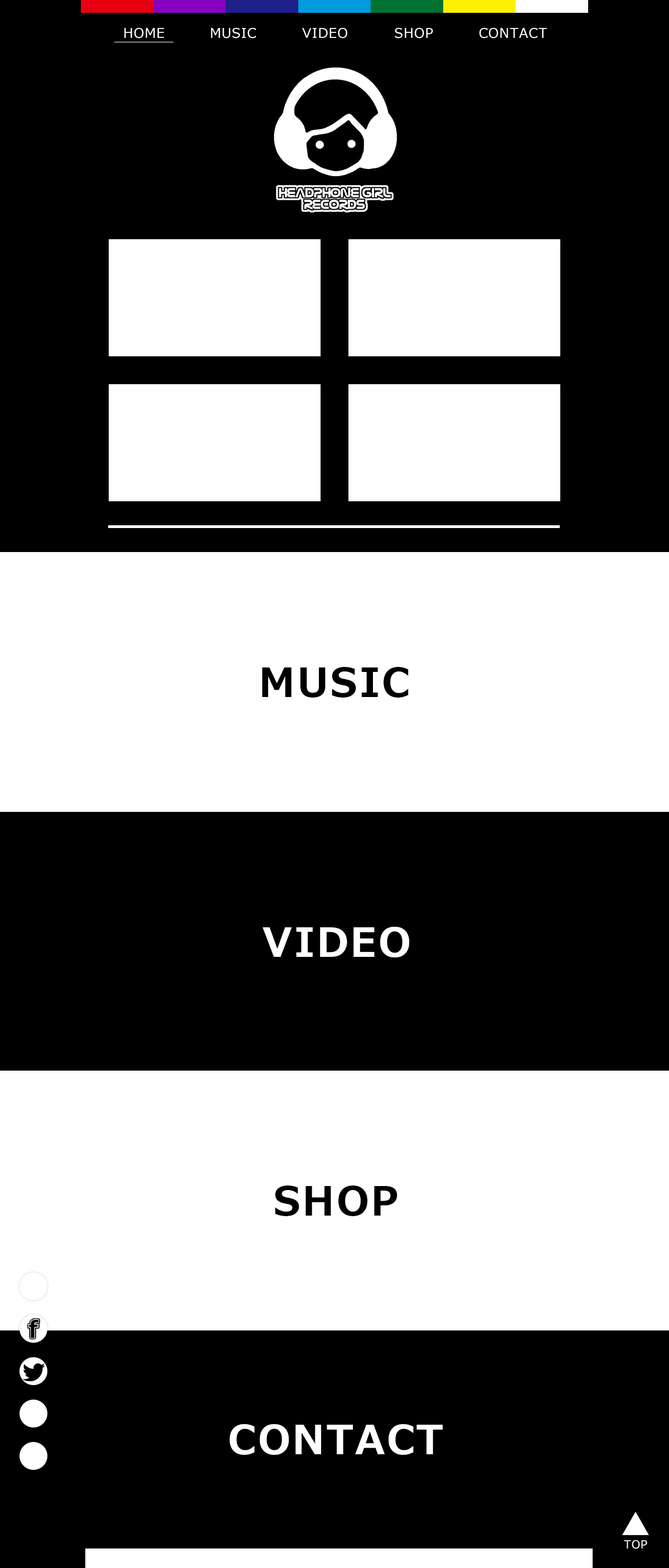
<style>
.page{position:relative;width:669px;height:1568px;background:#000000}
.page>*{position:absolute;margin:0}
.t1{font:13.4px "Meiryo";letter-spacing:0.05em;color:#ffffff}
.t2{font:40.1px "Meiryo-Bold";letter-spacing:0.05em;color:#000000}
.t3{font:40.1px "Meiryo-Bold";letter-spacing:0.05em;color:#ffffff}
.t4{font:11.2px "Meiryo";letter-spacing:0.05em;color:#ffffff}
</style>
<div class="page">
<p class="t1" style="left:124px;top:28px;width:40px;height:10px">HOME</p>
<p class="t1" style="left:211px;top:28px;width:45px;height:10px">MUSIC</p>
<p class="t1" style="left:302px;top:28px;width:45px;height:10px">VIDEO</p>
<p class="t1" style="left:395px;top:28px;width:38px;height:10px">SHOP</p>
<p class="t1" style="left:480px;top:28px;width:67px;height:10px">CONTACT</p>
<p class="t2" style="left:262px;top:667px;width:147px;height:31px">MUSIC</p>
<p class="t3" style="left:263px;top:927px;width:146px;height:30px">VIDEO</p>
<p class="t2" style="left:275px;top:1185px;width:123px;height:31px">SHOP</p>
<p class="t3" style="left:230px;top:1424px;width:213px;height:31px">CONTACT</p>
<p class="t4" style="left:624px;top:1540px;width:23px;height:9px">TOP</p>
</div>
